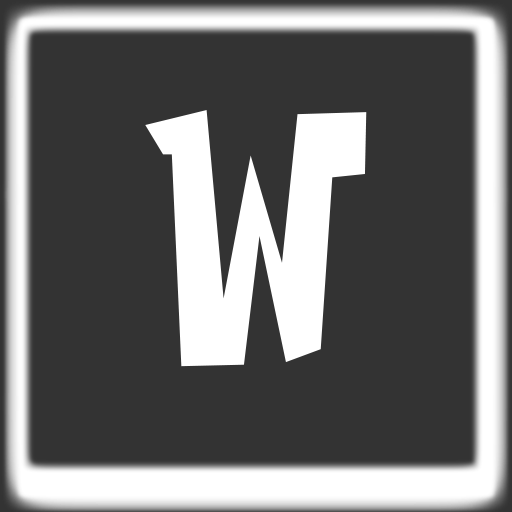
<style>
.page{position:relative;width:512px;height:512px;background:#333333}
.page>*{position:absolute;margin:0}
.t1{font:300px "ZombieTai";color:#ffffff}
</style>
<div class="page">
<p class="t1" style="left:145px;top:110px;width:222px;height:257px">W</p>
</div>
